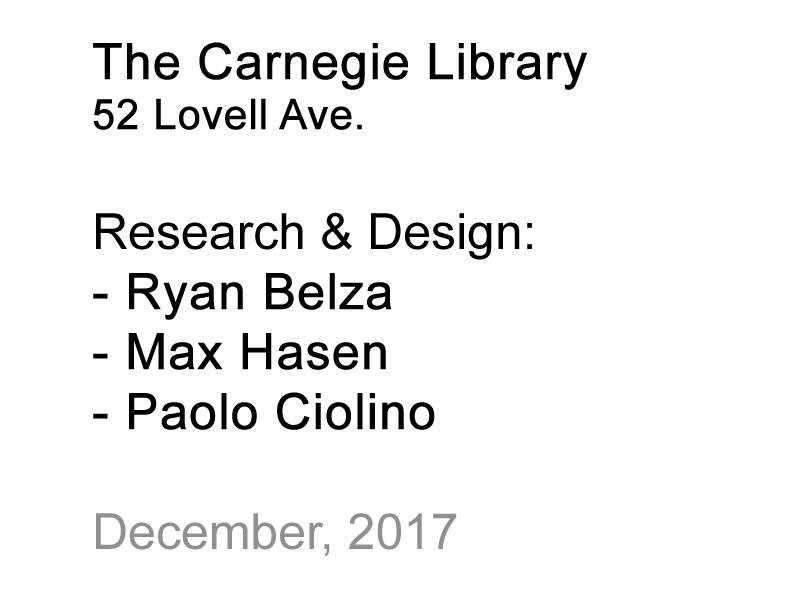
<style>
.page{position:relative;width:800px;height:600px;background:#ffffff}
.page>*{position:absolute;margin:0}
.t1{font:50px "ArialMT";color:#000000;font-weight:bold}
.t2{font:41.7px "ArialMT";color:#000000;font-weight:bold}
.t3{font:50px "ArialMT";color:#000000}
.t4{font:50px "ArialMT";color:#919090}
</style>
<div class="page">
<p class="t1" style="left:93px;top:42px;width:494px;height:515px">The Carnegie Library<br><span class="t2">52 Lovell Ave.<br></span><span class="t3"><br>Research &amp; Design:<br></span>- Ryan Belza<br>- Max Hasen<br>- Paolo Ciolino<br><br><span class="t4">December, 2017</span></p>
</div>
